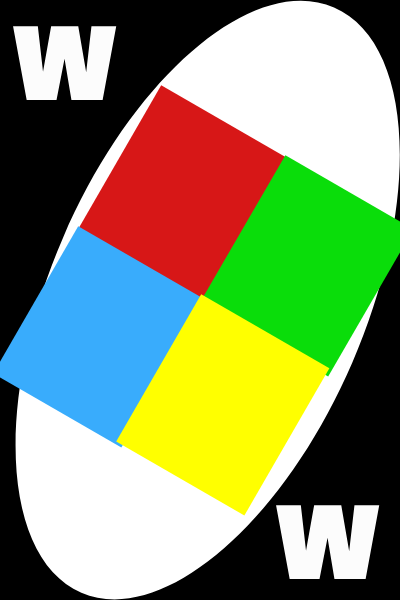
<style>
.page{position:relative;width:400px;height:600px;background:#000000}
.page>*{position:absolute;margin:0}
.t1{font:101.5px "DelaGothicOne-Regular";color:#ffffff}
</style>
<div class="page">
<p class="t1" style="left:13px;top:26px;width:104px;height:74px">W</p>
<p class="t1" style="left:276px;top:505px;width:104px;height:74px">W</p>
</div>
